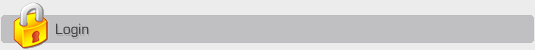
<style>
.page{position:relative;width:535px;height:50px;background:#c0c0c2}
.page>*{position:absolute;margin:0}
.t1{font:13.7px "VNI-Eurasia";color:#444444}
</style>
<div class="page">
<p class="t1" style="left:56px;top:23px;width:33px;height:14px">Login</p>
</div>
